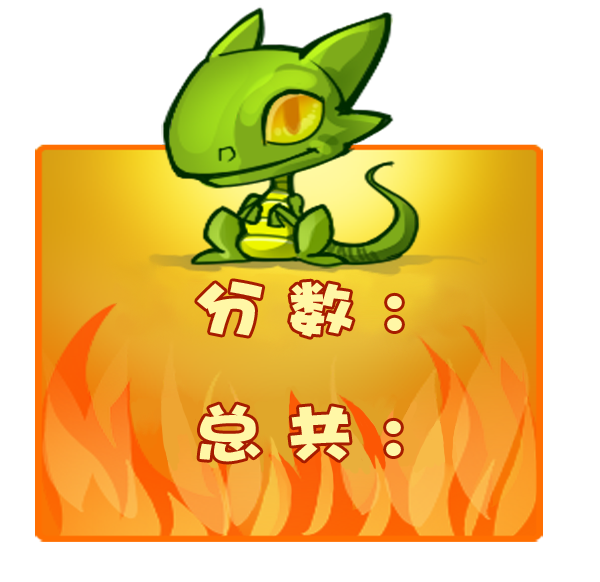
<style>
.page{position:relative;width:600px;height:582px;background:#ffffff}
.page>*{position:absolute;margin:0}
.t1{font:63px "DFPHaiBaoW12";letter-spacing:0.3em;color:#fff7a6;scale:1.11 1}
</style>
<div class="page">
<p class="t1" style="left:197px;top:281px;width:205px;height:56px">分数：</p>
<p class="t1" style="left:199px;top:404px;width:202px;height:58px">总共：</p>
</div>
